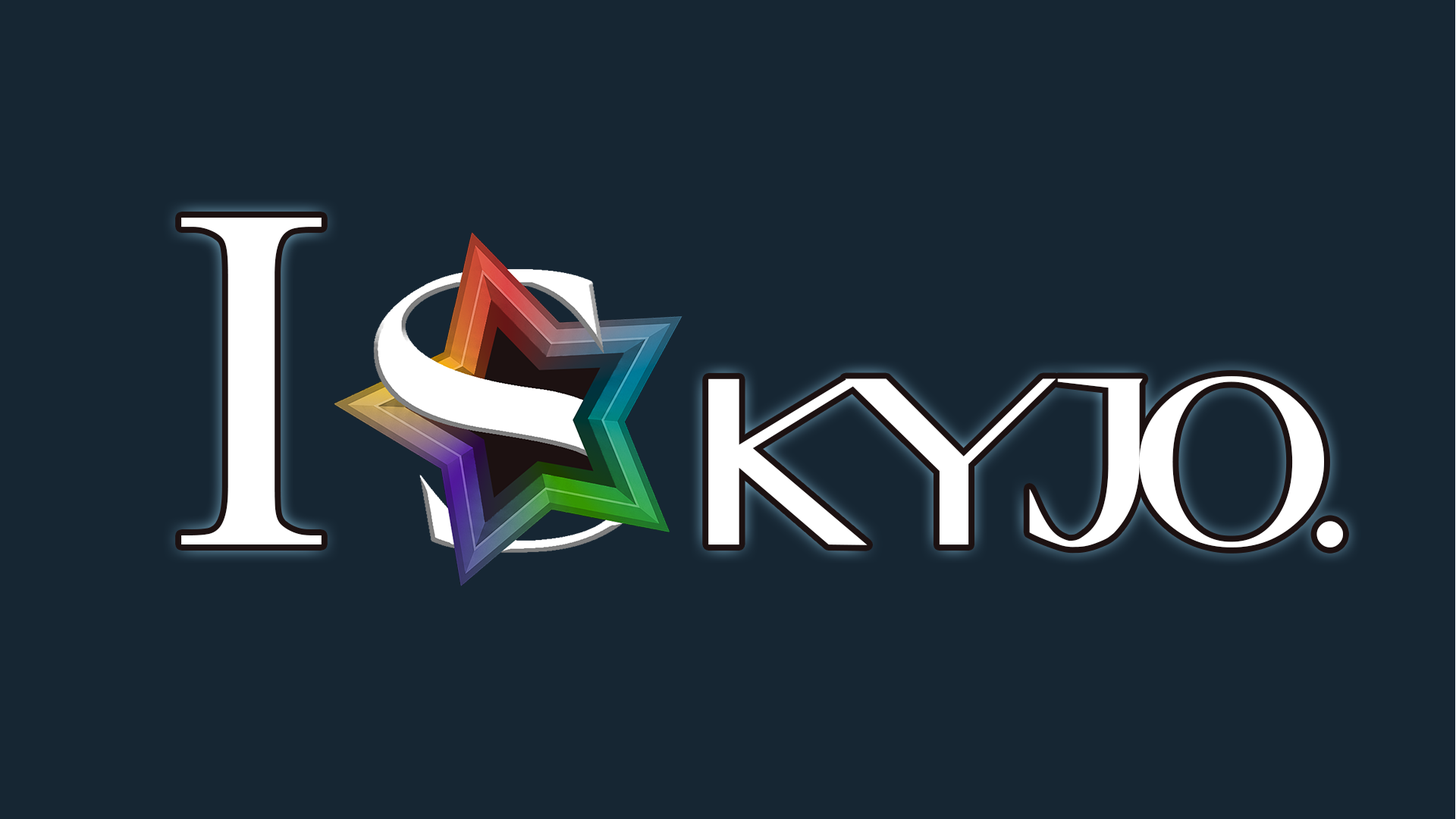
<style>
.page{position:relative;width:1456px;height:819px;background:#162633}
.page>*{position:absolute;margin:0}
.t1{font:736.8px "Microsoft-Himalaya";letter-spacing:-0.1em;color:#ffffff}
.t2{font:236.8px "CosiTimes-Bold";letter-spacing:-0.1em;color:#ffffff}
</style>
<div class="page">
<p class="t1" style="left:181px;top:218px;width:141px;height:326px">I</p>
<p class="t2" style="left:708px;top:376px;width:635px;height:172px">kyjo.</p>
</div>
